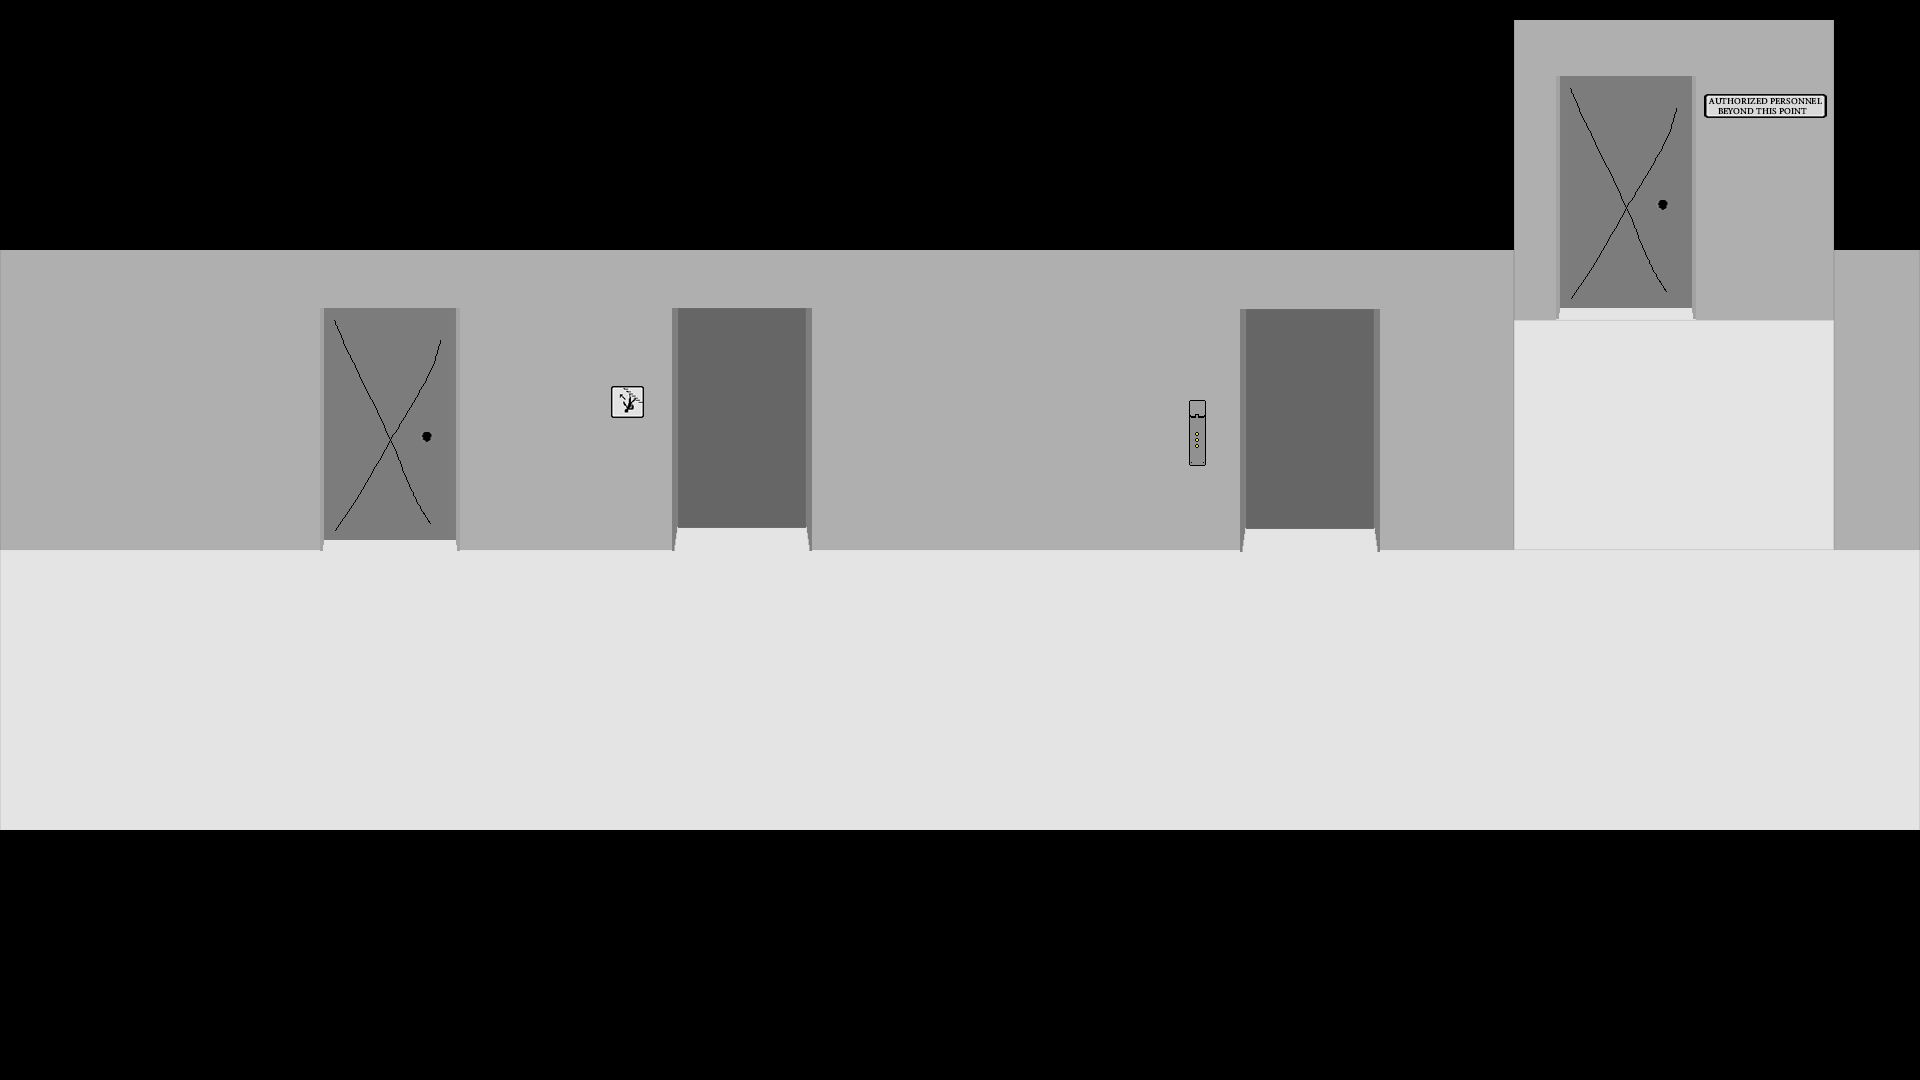
<style>
.page{position:relative;width:1920px;height:1080px;background:#000000}
.page>*{position:absolute;margin:0}
.t1{font:9px "MinionVariableConcept-Roman";color:#000000}
</style>
<div class="page">
<p class="t1" style="left:1708px;top:98px;width:115px;height:17px">AUTHORIZED PERSONNEL<br>    BEYOND THIS POINT</p>
</div>
